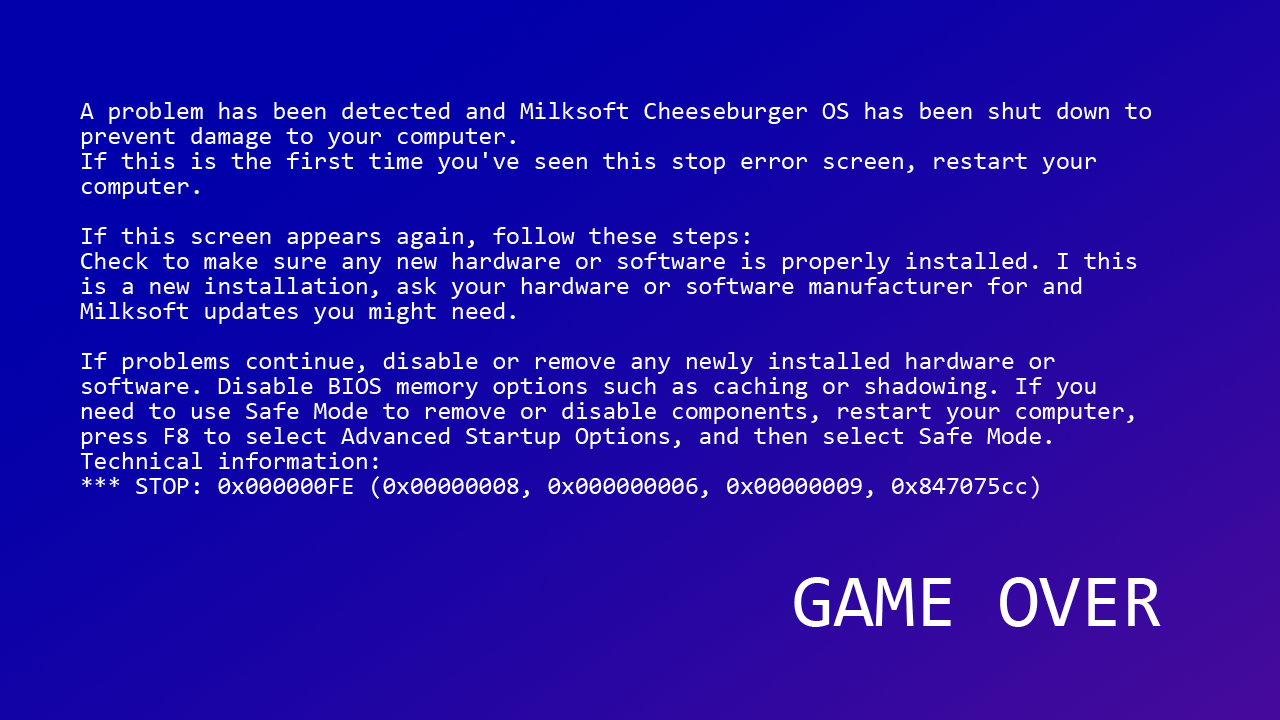
<style>
.page{position:relative;width:1280px;height:720px}
.page>*{position:absolute;margin:0}
.t1{font:25px/25px "Consolas";color:#ffffff}
.t2{font:75px "Consolas";color:#ffffff}
</style>
<div class="page">
<p class="t1" style="left:80px;top:102px;width:1072px;height:397px">A problem has been detected and Milksoft Cheeseburger OS has been shut down to prevent damage to your computer.<br>If this is the first time you've seen this stop error screen, restart your computer. <br><br>If this screen appears again, follow these steps:<br>Check to make sure any new hardware or software is properly installed. I this is a new installation, ask your hardware or software manufacturer for and Milksoft updates you might need.<br><br>If problems continue, disable or remove any newly installed hardware or software. Disable BIOS memory options such as caching or shadowing. If you need to use Safe Mode to remove or disable components, restart your computer, press F8 to select Advanced Startup Options, and then select Safe Mode.<br>Technical information:<br>*** STOP: 0x000000FE (0x00000008, 0x000000006, 0x00000009, 0x847075cc)</p>
<p class="t2" style="left:794px;top:577px;width:367px;height:50px">GAME OVER</p>
</div>
